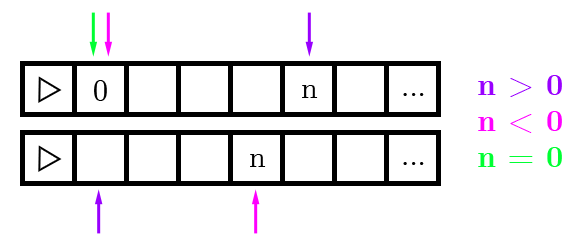
<style>
.page{position:relative;width:578px;height:245px;background:#ffffff}
.page>*{position:absolute;margin:0}
.t1{font:30px "CMUSerif-Bold";color:#9900ff}
.t2{font:30px "CMUSerif-Bold";color:#ff00ff}
.t3{font:30px "CMUSerif-Bold";color:#00ff33}
.t4{font:30px "CMUSerif-Roman";color:#000000}
</style>
<div class="page">
<p class="t1" style="left:478px;top:75px;width:84px;height:92px">n &gt; 0<br><span class="t2">n &lt; 0<br></span><span class="t3">n = 0</span></p>
<p class="t4" style="left:94px;top:80px;width:13px;height:21px">0</p>
<p class="t4" style="left:302px;top:85px;width:16px;height:13px">n</p>
<p class="t4" style="left:403px;top:93px;width:21px;height:3px">...</p>
<p class="t4" style="left:250px;top:154px;width:16px;height:13px">n</p>
<p class="t4" style="left:403px;top:162px;width:21px;height:3px">...</p>
</div>
